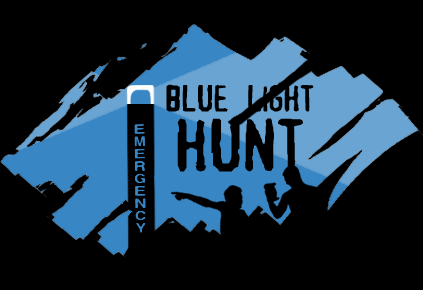
<style>
.page{position:relative;width:423px;height:290px;background:#000000}
.page>*{position:absolute;margin:0}
.t1{font:36px "Alias";color:#000000}
.t2{font:72px "Alias";color:#000000}
</style>
<div class="page">
<p class="t1" style="left:166px;top:84px;width:148px;height:88px;text-align:center">blue light<br><span class="t2">hunt</span></p>
</div>
